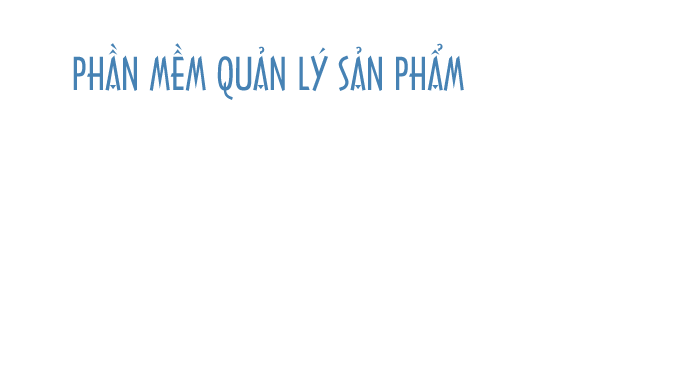
<style>
.page{position:relative;width:678px;height:391px;background:#ffffff}
.page>*{position:absolute;margin:0}
.t1{font:43.3px "Architecture";color:#4682b4}
</style>
<div class="page">
<p class="t1" style="left:73px;top:43px;width:391px;height:57px">PHẦN MỀM QUẢN LÝ SẢN PHẨM</p>
</div>
